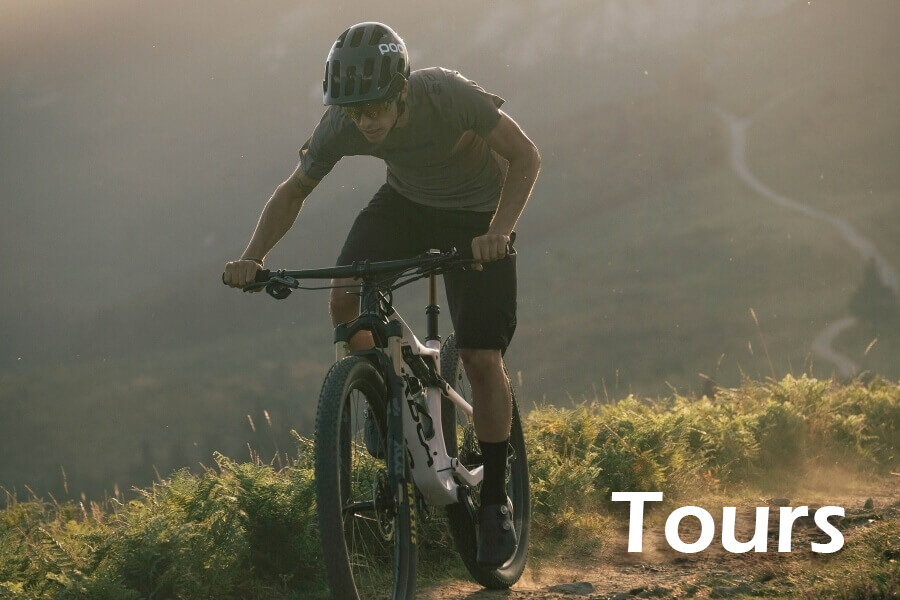
<style>
.page{position:relative;width:900px;height:600px}
.page>*{position:absolute;margin:0}
.t1{font:90px "ErasITC-Demi";color:#ffffff}
</style>
<div class="page">
<p class="t1" style="left:611px;top:492px;width:234px;height:61px">Tours</p>
</div>
